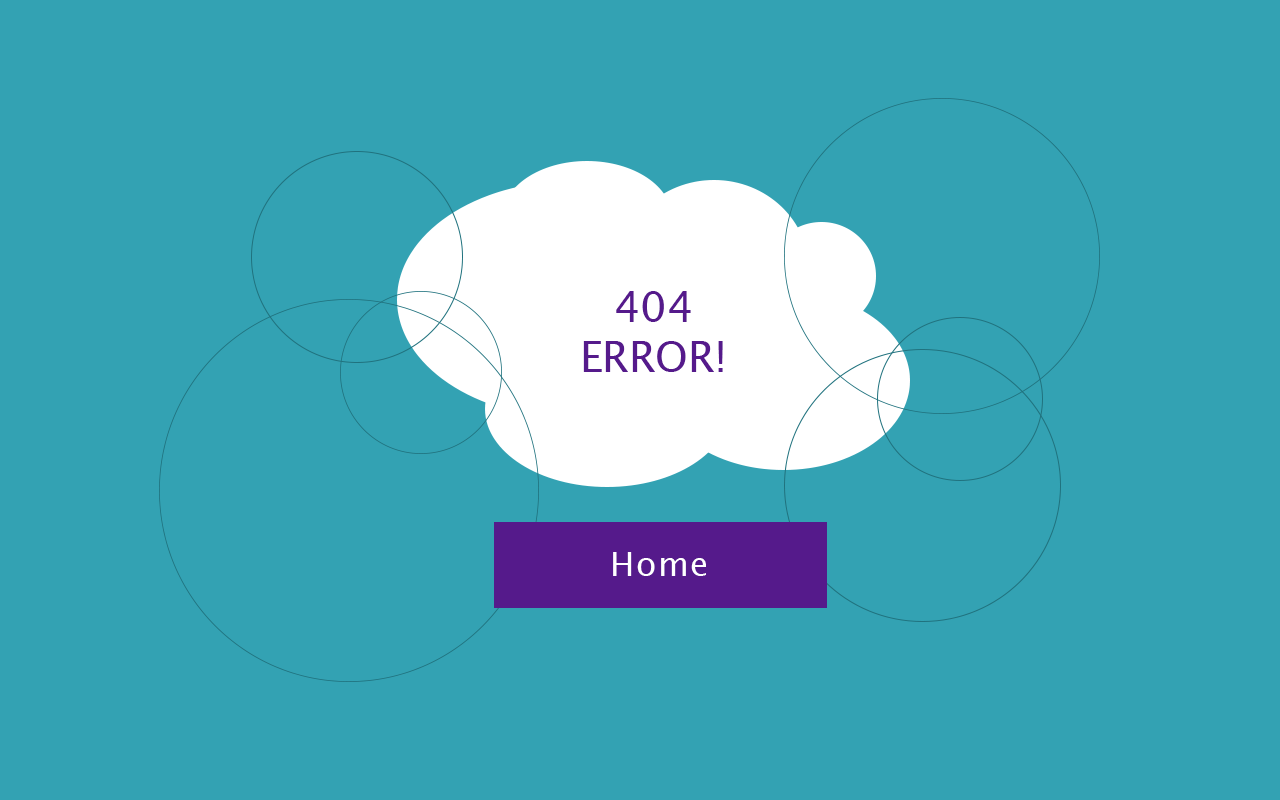
<style>
.page{position:relative;width:1280px;height:800px;background:#33a2b3}
.page>*{position:absolute;margin:0}
.t1{font:41.7px/50px "LucidaGrande";color:#551a8b}
.t2{font:33.3px "LucidaGrande";letter-spacing:0.033em;color:#ffffff}
</style>
<div class="page">
<p class="t1" style="left:583px;top:291px;width:140px;height:81px;text-align:center">404<br>ERROR!</p>
<p class="t2" style="left:613px;top:552px;width:93px;height:24px">Home</p>
</div>
